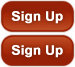
<style>
.page{position:relative;width:75px;height:67px}
.page>*{position:absolute;margin:0}
.t1{font:13px "Arial-BoldMT";color:#ffffff;font-weight:bold}
</style>
<div class="page">
<p class="t1" style="left:11px;top:11px;width:52px;height:13px">Sign Up</p>
<p class="t1" style="left:11px;top:45px;width:52px;height:13px">Sign Up</p>
</div>
